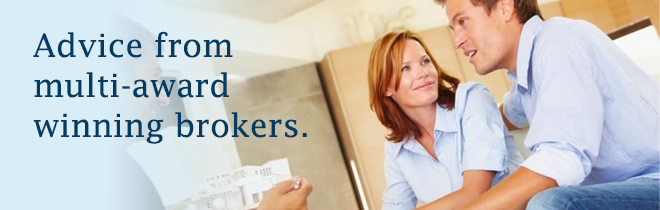
<style>
.page{position:relative;width:660px;height:210px}
.page>*{position:absolute;margin:0}
.t1{font:32px/40px "LucidaFax";letter-spacing:0.005em;color:#003c66}
</style>
<div class="page">
<p class="t1" style="left:33px;top:31px;width:274px;height:113px">Advice from<br>multi-award<br>winning brokers.</p>
</div>
